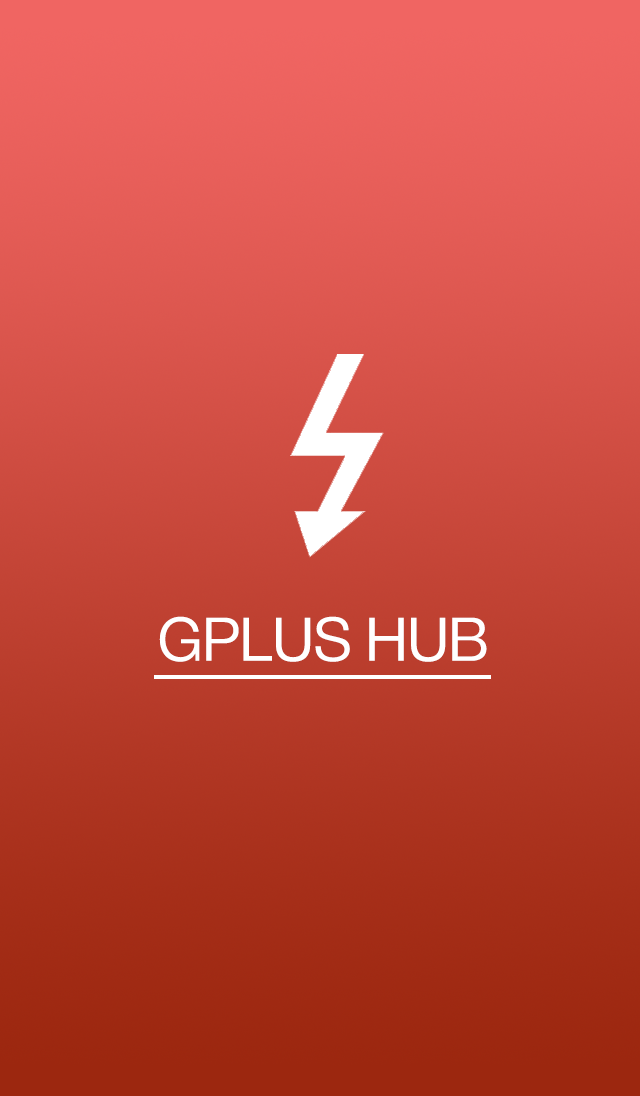
<style>
.page{position:relative;width:640px;height:1096px}
.page>*{position:absolute;margin:0}
.t1{font:60px "AppleSDGothicNeo-Regular";letter-spacing:-0.035em;color:#ffffff}
</style>
<div class="page">
<p class="t1" style="left:159px;top:616px;width:328px;height:46px">GPLUS HUB</p>
</div>
